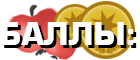
<style>
.page{position:relative;width:140px;height:60px;background:#ffffff}
.page>*{position:absolute;margin:0}
.t1{font:30.4px "EuropeBold";color:#ffffff}
.t2{font:30.4px "EuropeBold"}
</style>
<div class="page">
<p class="t1" style="left:1px;top:22px;width:133px;height:23px">БАЛЛЫ:</p>
<p class="t2" style="left:4px;top:25px;width:133px;height:23px">БАЛЛЫ:</p>
</div>
